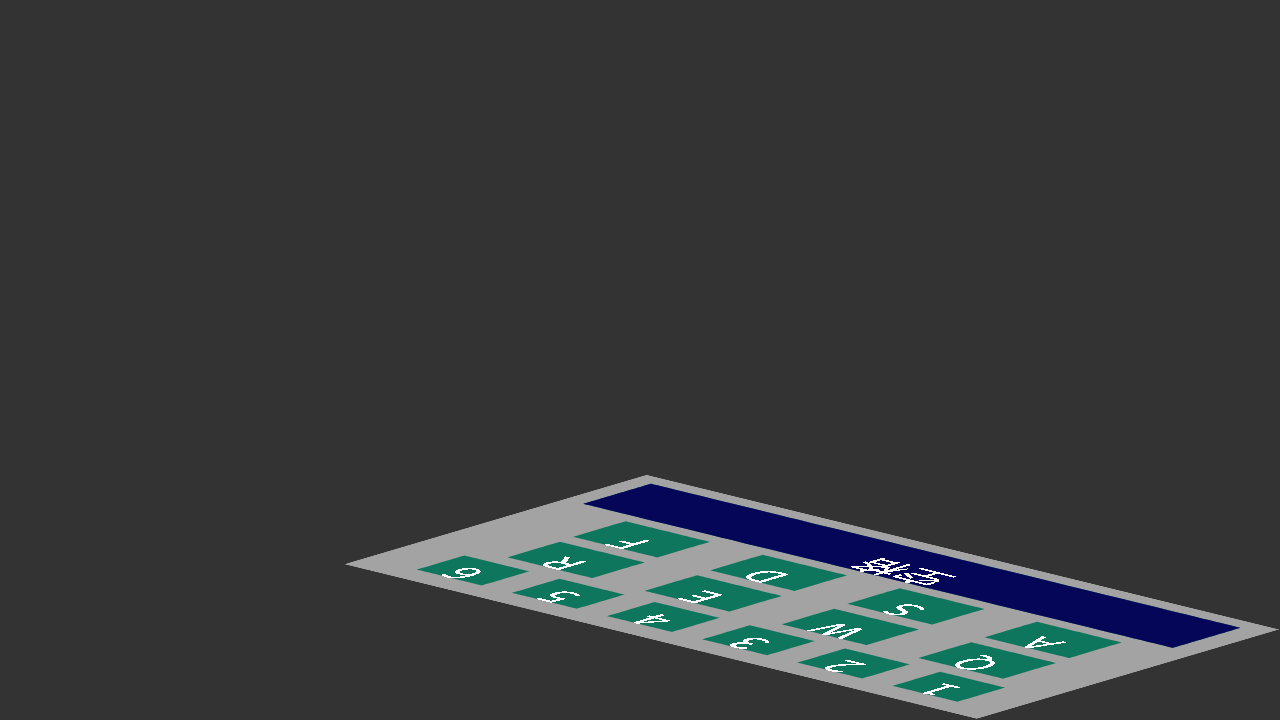
<style>
.page{position:relative;width:1280px;height:720px;background:#333333}
.page>*{position:absolute;margin:0}
.t1{font:40px "SourceHanSansSC-Regular";color:#ffffff;scale:1.08 1}
</style>
<div class="page">
<p class="t1" style="left:605px;top:540px;width:44px;height:9px;rotate:-166deg">F</p>
<p class="t1" style="left:543px;top:556px;width:43px;height:14px;rotate:-166deg">R</p>
<p class="t1" style="left:851px;top:558px;width:105px;height:27px;rotate:-166deg">空格</p>
<p class="t1" style="left:851px;top:558px;width:105px;height:27px;rotate:-166deg">空格</p>
<p class="t1" style="left:442px;top:568px;width:39px;height:10px;rotate:-166deg">6</p>
<p class="t1" style="left:746px;top:571px;width:42px;height:12px;rotate:-166deg">D</p>
<p class="t1" style="left:537px;top:591px;width:43px;height:12px;rotate:-166deg">5</p>
<p class="t1" style="left:678px;top:590px;width:44px;height:13px;rotate:-166deg">E</p>
<p class="t1" style="left:883px;top:604px;width:41px;height:11px;rotate:-166deg">S</p>
<p class="t1" style="left:634px;top:614px;width:36px;height:10px;rotate:-166deg">4</p>
<p class="t1" style="left:807px;top:624px;width:55px;height:15px;rotate:-166deg">W</p>
<p class="t1" style="left:730px;top:638px;width:39px;height:11px;rotate:-166deg">3</p>
<p class="t1" style="left:1025px;top:636px;width:41px;height:12px;rotate:-166deg">A</p>
<p class="t1" style="left:825px;top:660px;width:41px;height:12px;rotate:-166deg">2</p>
<p class="t1" style="left:955px;top:655px;width:40px;height:15px;rotate:-166deg">Q</p>
<p class="t1" style="left:923px;top:683px;width:37px;height:12px;rotate:-166deg">1</p>
</div>
